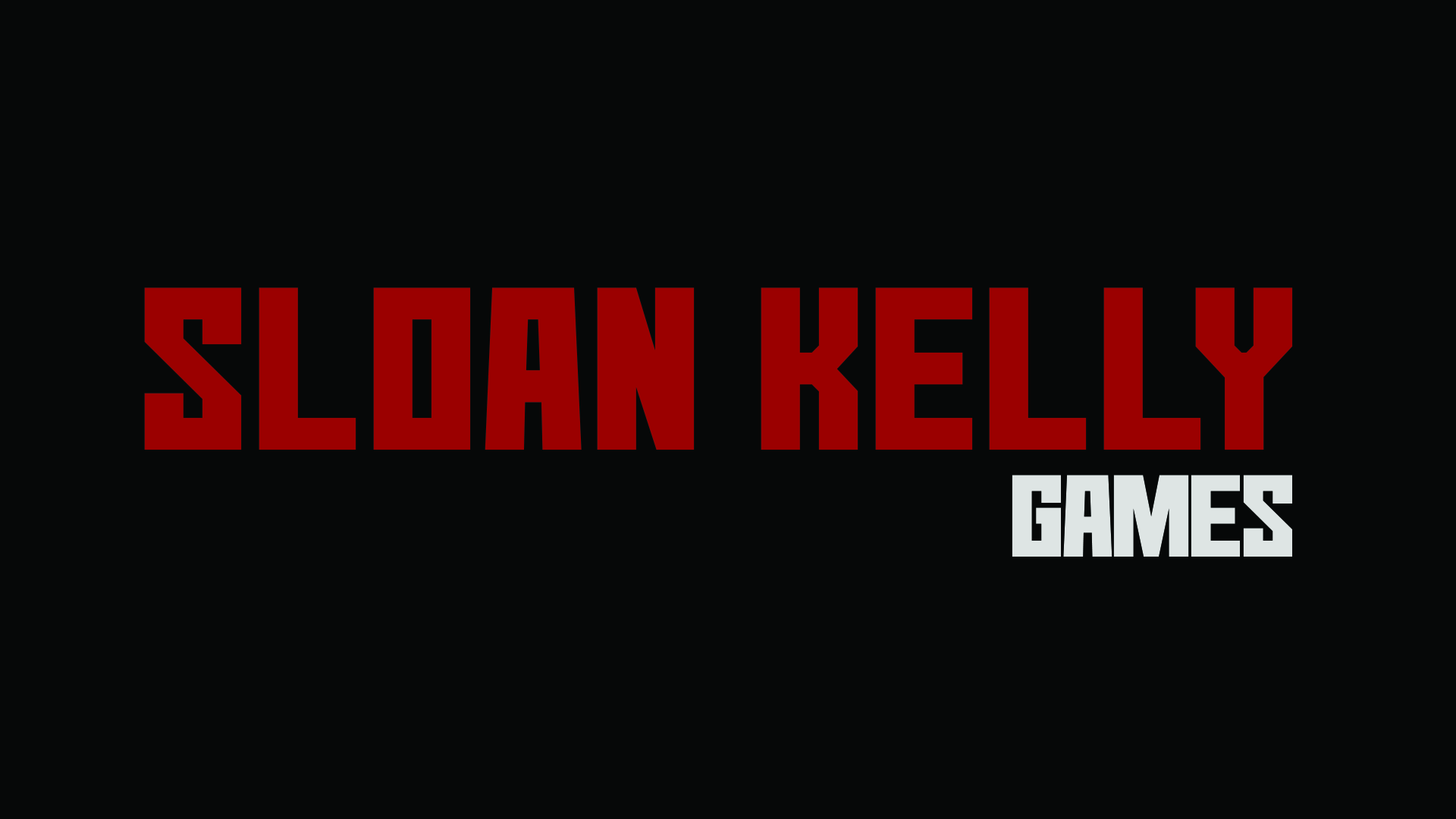
<style>
.page{position:relative;width:1456px;height:819px;background:#060808}
.page>*{position:absolute;margin:0}
.t1{font:226px "No-Continue";color:#9c0000}
.t2{font:226px "No-Continue";letter-spacing:-0.1em;color:#9c0000}
.t3{font:113.7px "No-Continue";letter-spacing:-0.05em;color:#dee5e4}
</style>
<div class="page">
<p class="t1" style="left:144px;top:287px;width:1149px;height:163px">SLOAN KEL<span class="t2">L</span>Y</p>
<p class="t3" style="left:1012px;top:475px;width:281px;height:82px">GAMES</p>
</div>
